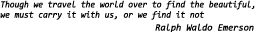
<style>
.page{position:relative;width:256px;height:32px;background:#ffffff}
.page>*{position:absolute;margin:0}
.t1{font:9.3px/10.3px "Consolas-Italic";color:#000000;scale:0.93 1}
.t2{font:9.5px "Consolas-Italic";color:#000000}
</style>
<div class="page">
<p class="t1" style="left:0px;top:0px;width:255px;height:20px">Though we travel the world over to find the beautiful, <br>we must carry it with us, or we find it not</p>
<p class="t2" style="left:155px;top:23px;width:99px;height:10px">Ralph Waldo Emerson</p>
</div>
